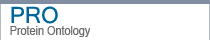
<style>
.page{position:relative;width:210px;height:40px;background:#ffffff}
.page>*{position:absolute;margin:0}
.t1{font:12px "ArialMT";color:#696969;scale:0.9 1}
</style>
<div class="page">
<p class="t1" style="left:10px;top:25px;width:80px;height:14px">Protein Ontology</p>
</div>
